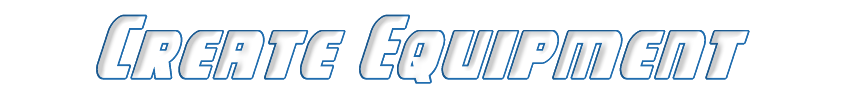
<style>
.page{position:relative;width:850px;height:100px;background:#ffffff}
.page>*{position:absolute;margin:0}
.t1{font:75px "CampJusticeOutlineItalic";color:#206daf}
</style>
<div class="page">
<p class="t1" style="left:96px;top:14px;width:654px;height:70px">Create Equipment</p>
</div>
